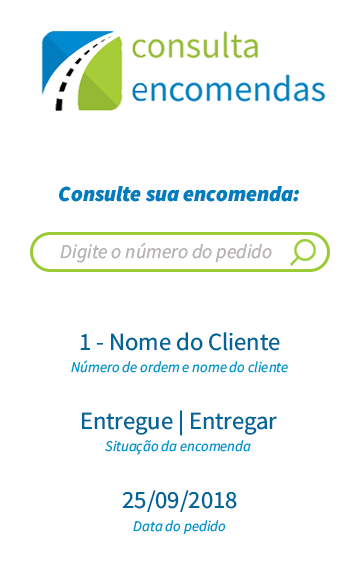
<style>
.page{position:relative;width:360px;height:563px;background:#ffffff}
.page>*{position:absolute;margin:0}
.t1{font:21.7px "SourceSansItalic-BlackItalic";color:#007dbf}
.t2{font:19.7px "SourceSansItalic-Italic";color:#b8b4b4}
.t3{font:14.8px/22.7px "SourceSansItalic-Italic";color:#0099cc}
.t4{font:24.7px/22.7px "SourceSansRoman-Regular";color:#006699}
</style>
<div class="page">
<p class="t1" style="left:59px;top:186px;width:240px;height:16px">Consulte sua encomenda:</p>
<p class="t2" style="left:60px;top:242px;width:212px;height:21px">Digite o número do pedido</p>
<p class="t3" style="left:71px;top:332px;width:217px;height:41px;text-align:center"><span class="t4">1 - Nome do Cliente<br></span>Número de ordem e nome do cliente</p>
<p class="t3" style="left:82px;top:410px;width:195px;height:45px;text-align:center"><span class="t4">Entregue | Entregar<br></span>Situação da encomenda</p>
<p class="t3" style="left:122px;top:490px;width:115px;height:45px;text-align:center"><span class="t4">25/09/2018<br></span>Data do pedido</p>
</div>
